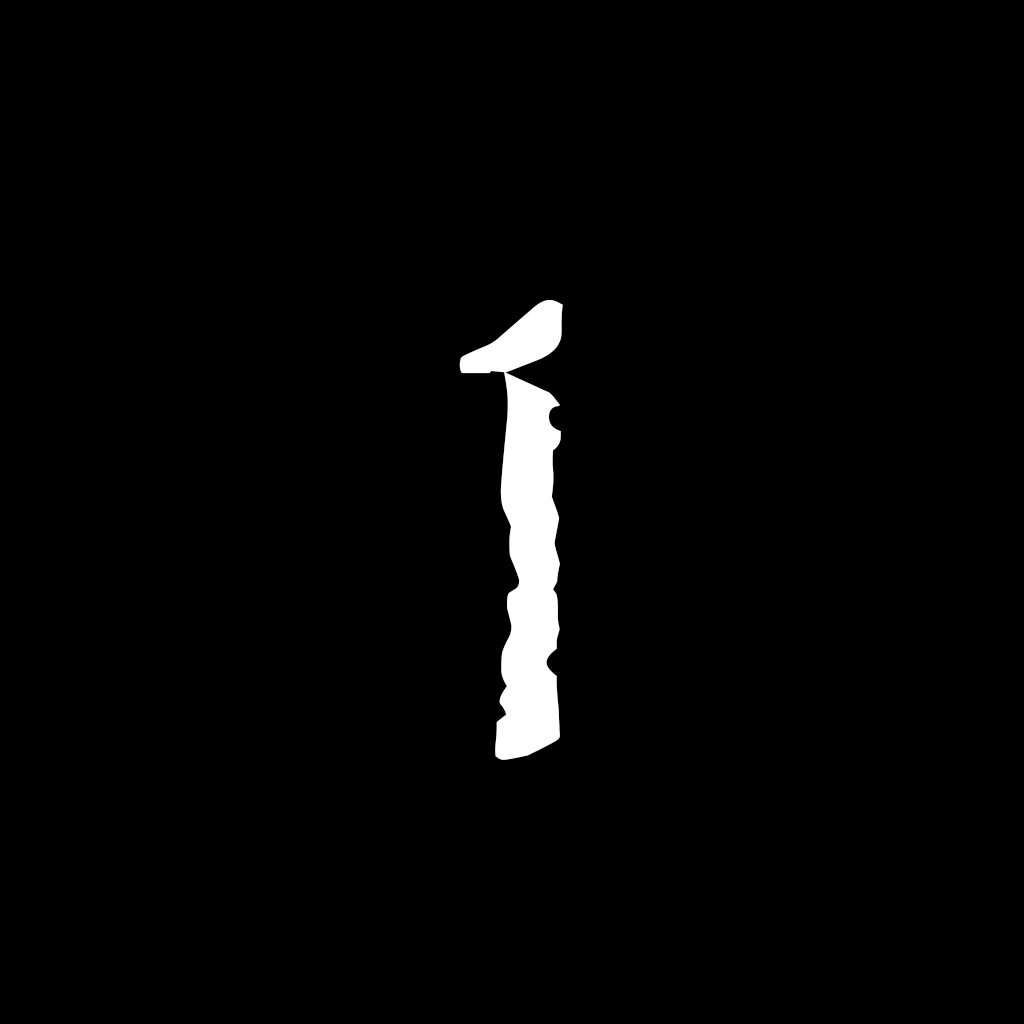
<style>
.page{position:relative;width:1024px;height:1024px;background:#000000}
.page>*{position:absolute;margin:0}
.t1{font:833.3px "Papyrus-Regular";color:#ffffff}
</style>
<div class="page">
<p class="t1" style="left:459px;top:300px;width:104px;height:460px">1</p>
</div>
